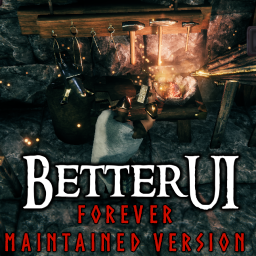
<style>
.page{position:relative;width:256px;height:256px}
.page>*{position:absolute;margin:0}
.t1{font:24px "Norse-Bold";letter-spacing:0.2em;color:#ca0e00;text-transform:uppercase}
</style>
<div class="page">
<p class="t1" style="left:5px;top:205px;width:239px;height:47px;text-align:center">Forever<br>Maintained Version</p>
</div>
